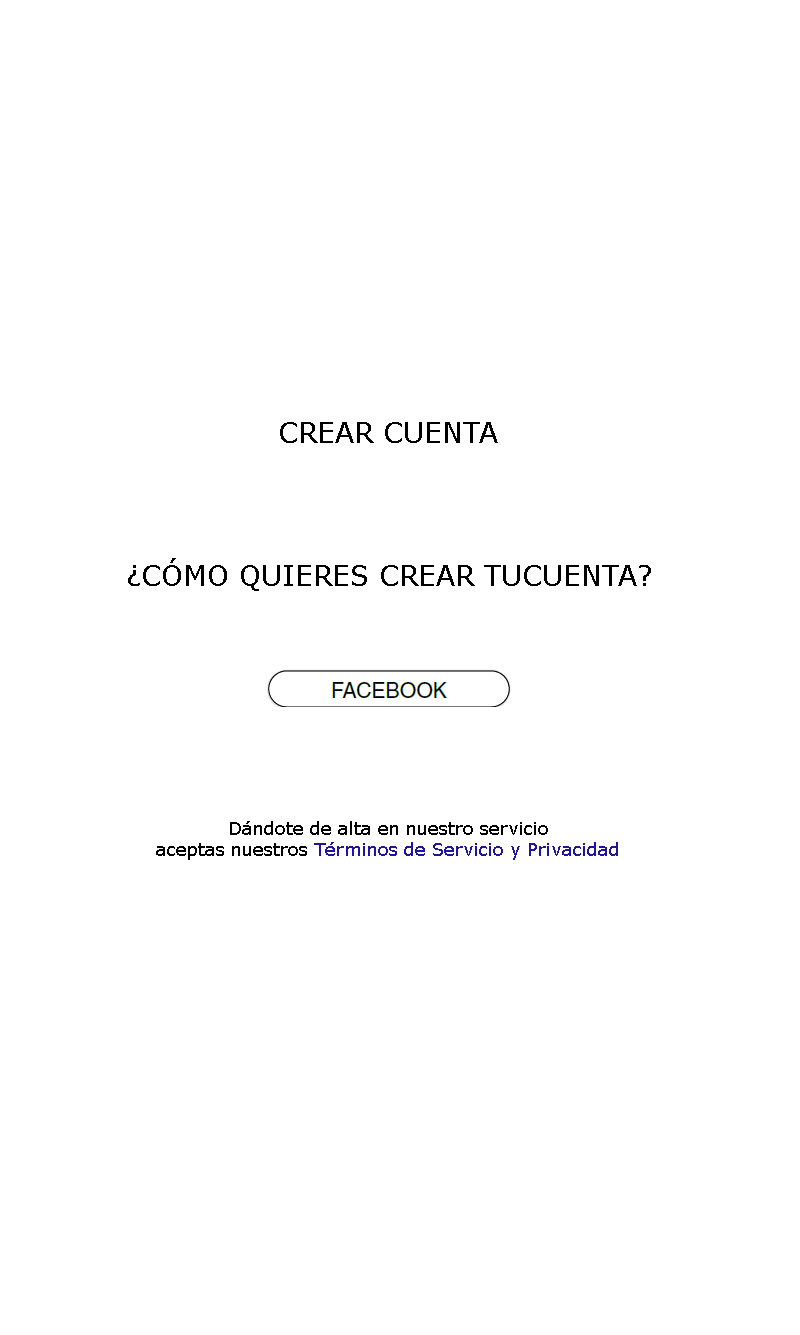
<style>
.page{position:relative;width:800px;height:1335px;background:#ffffff}
.page>*{position:absolute;margin:0}
.t1{font:28px "Verdana";color:#000000}
.t2{font:18px "Verdana";color:#000000}
.t3{font:18px "Verdana";color:#1e14a0}
</style>
<div class="page">
<p class="t1" style="left:280px;top:422px;width:218px;height:21px">CREAR CUENTA</p>
<p class="t1" style="left:128px;top:558px;width:523px;height:33px">¿CÓMO QUIERES CREAR TUCUENTA?</p>
<p class="t2" style="left:156px;top:821px;width:462px;height:39px;text-align:center">Dándote de alta en nuestro servicio<br>aceptas nuestros <span class="t3">Términos de Servicio y Privacidad</span></p>
</div>
